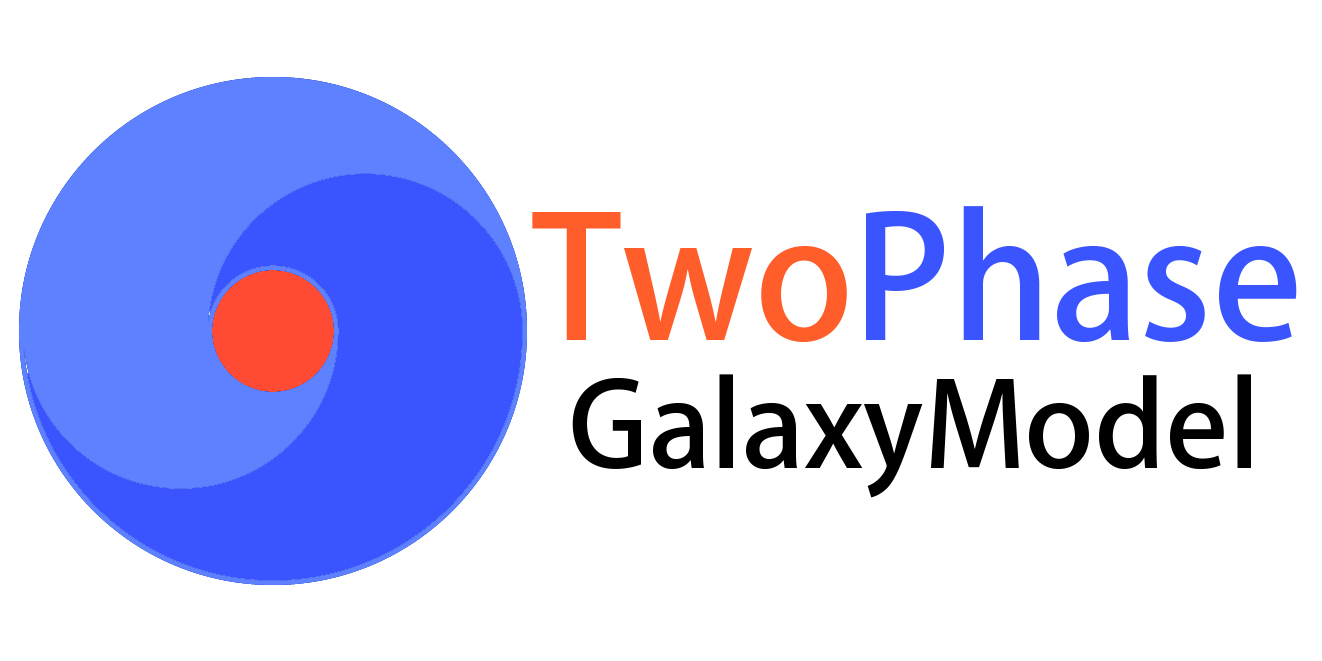
<style>
.page{position:relative;width:1322px;height:661px;background:#ffffff}
.page>*{position:absolute;margin:0}
.t1{font:166.7px "AdobeHeitiStd-Regular";color:#3a55ff}
.t2{font:166.7px "AdobeHeitiStd-Regular";color:#ff5d29}
.t3{font:116.7px "AdobeHeitiStd-Regular";color:#000000}
</style>
<div class="page">
<p class="t1" style="left:532px;top:206px;width:765px;height:137px"><span class="t2">Two</span>Phase</p>
<p class="t3" style="left:572px;top:374px;width:679px;height:124px">GalaxyModel</p>
</div>
